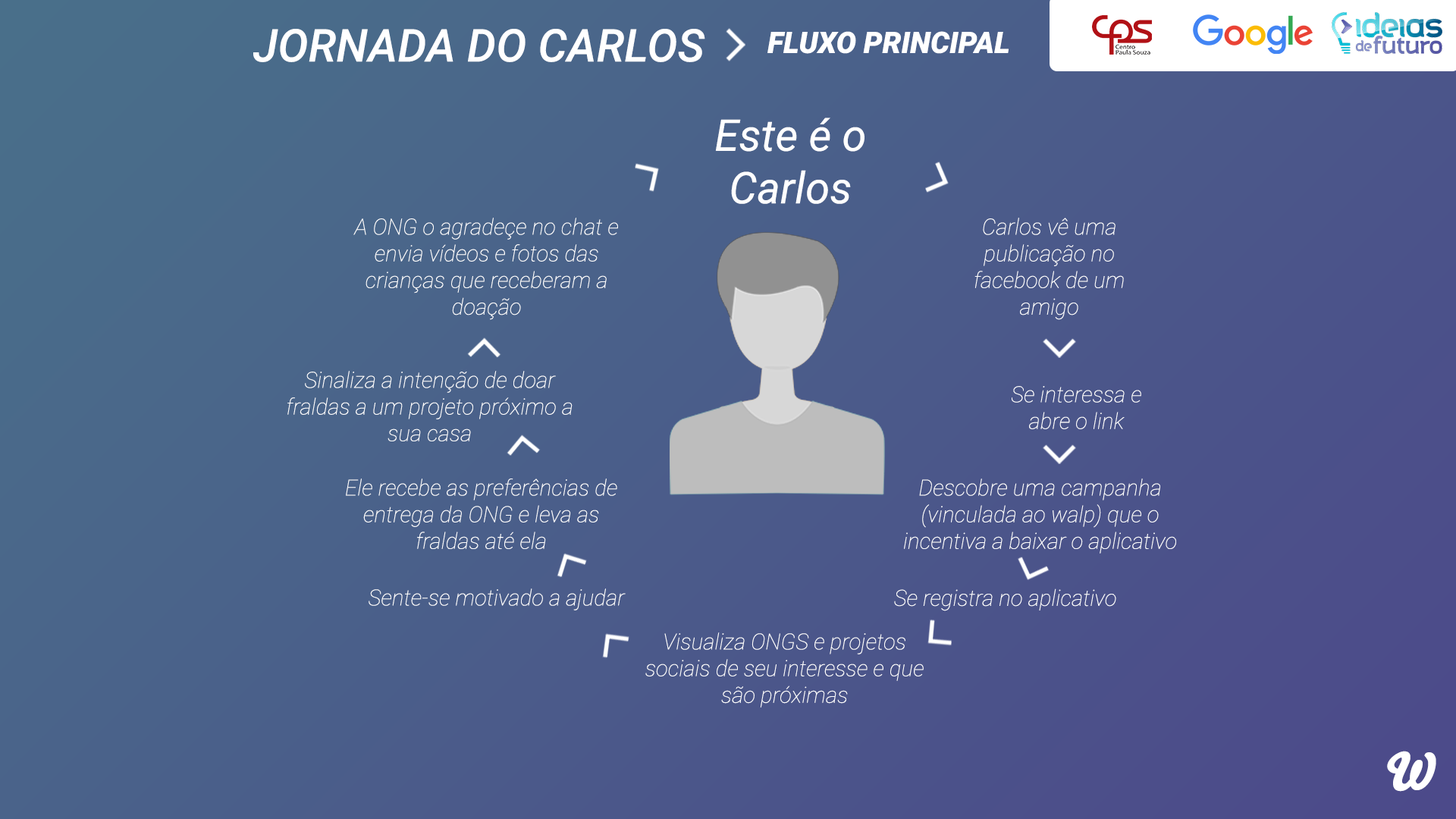
<style>
.page{position:relative;width:1456px;height:819px}
.page>*{position:absolute;margin:0}
.t1{font:45.3px "Roboto-MediumItalic";color:#ffffff}
.t2{font:29.6px "Roboto-BlackItalic";color:#ffffff}
.t3{font:43.8px "Roboto-Italic";color:#ffffff}
.t4{font:22.2px "Roboto-ThinItalic";color:#ffffff}
.t5{font:50.8px "Bello-Pro";color:#ffffff}
</style>
<div class="page">
<p class="t1" style="left:253px;top:29px;width:452px;height:33px">JORNADA DO CARLOS</p>
<p class="t2" style="left:767px;top:31px;width:242px;height:23px">FLUXO PRINCIPAL</p>
<p class="t3" style="left:715px;top:118px;width:149px;height:86px;text-align:center">Este é o Carlos</p>
<p class="t4" style="left:353px;top:218px;width:265px;height:102px;text-align:center">A ONG o agradeçe no chat e envia vídeos e fotos das crianças que receberam a doação</p>
<p class="t4" style="left:974px;top:218px;width:150px;height:102px;text-align:center">Carlos vê uma publicação no facebook de um amigo</p>
<p class="t4" style="left:287px;top:371px;width:286px;height:70px;text-align:center">Sinaliza a intenção de doar fraldas a um projeto próximo a sua casa</p>
<p class="t4" style="left:1012px;top:386px;width:129px;height:43px;text-align:center">Se interessa e abre o link</p>
<p class="t4" style="left:346px;top:479px;width:271px;height:70px;text-align:center">Ele recebe as preferências de entrega da ONG e leva as fraldas até ela</p>
<p class="t4" style="left:904px;top:479px;width:272px;height:75px;text-align:center">Descobre uma campanha (vinculada ao walp) que o incentiva a baixar o aplicativo</p>
<p class="t4" style="left:369px;top:588px;width:257px;height:22px">Sente-se motivado a ajudar</p>
<p class="t4" style="left:894px;top:588px;width:222px;height:23px">Se registra no aplicativo</p>
<p class="t4" style="left:645px;top:632px;width:279px;height:76px;text-align:center">Visualiza ONGS e projetos sociais de seu interesse e que são próximas</p>
<p class="t5" style="left:1387px;top:751px;width:49px;height:41px">W</p>
</div>
